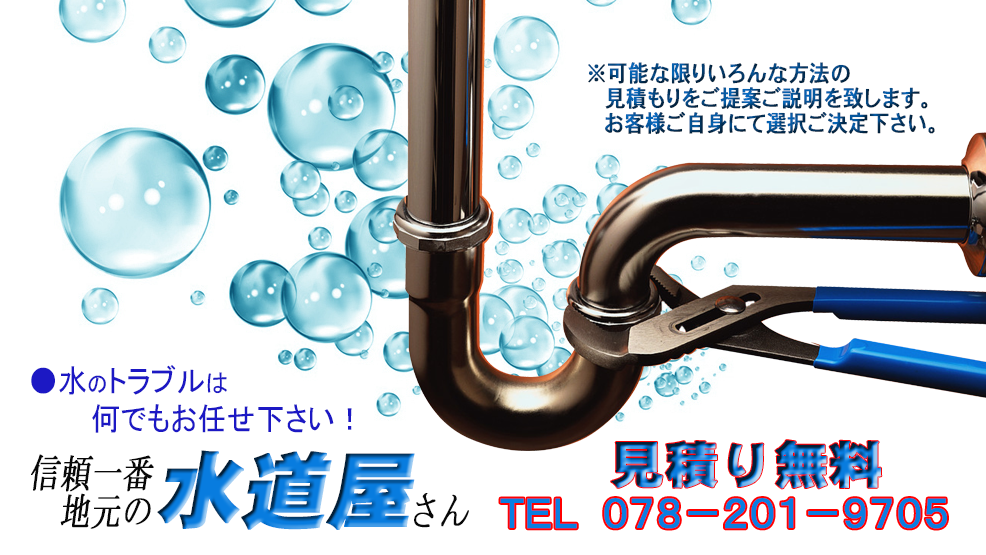
<style>
.page{position:relative;width:986px;height:555px;background:#ffffff}
.page>*{position:absolute;margin:0}
.t1{font:23.3px/25px "DHHSGothic-W5-WINP-RKSJ-H";font-weight:bold;scale:0.87 1}
.t2{font:32.1px/18.8px "MS-PGothic";color:#1c18c4;scale:0.91 1}
.t3{font:22.9px/18.8px "MS-PGothic";color:#1c18c4;scale:0.91 1}
.t4{font:25.2px/18.8px "MS-PGothic";color:#1c18c4;scale:0.91 1}
.t5{font:50px "DFGothic-EB-WIN-RKSJ-H";font-weight:bold;scale:1.07 1}
.t6{font:40px/37.5px "MS-Mincho";color:#080808;font-weight:bold;font-style:italic;scale:0.75 1}
.t7{font:83.3px "DFGothic-EB-WIN-RKSJ-H";font-weight:bold;font-style:italic}
.t8{font:43.3px "MS-PGothic";color:#097fe1;font-weight:bold;scale:0.87 1}
</style>
<div class="page">
<p class="t1" style="left:588px;top:62px;width:347px;height:73px;text-align:center">※可能な限りいろんな方法の<br>      見積もりをご提案ご説明を致します。<br>       お客様ご自身にて選択ご決定下さい。</p>
<p class="t2" style="left:31px;top:365px;width:321px;height:68px">●水<span class="t3">の</span>トラブル<span class="t4">は<br></span><br>       何でもお任せ下さい！</p>
<p class="t5" style="left:611px;top:440px;width:271px;height:49px">見積り無料</p>
<p class="t6" style="left:31px;top:454px;width:438px;height:75px">信頼一番<br> 地元の         さん</p>
<p class="t7" style="left:157px;top:450px;width:258px;height:80px">水道屋</p>
<p class="t8" style="left:500px;top:498px;width:447px;height:31px">ＴＥＬ  ０７８－２０１－９７０５</p>
</div>
